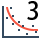
<style>
.page{position:relative;width:40px;height:39px;background:#ffffff}
.page>*{position:absolute;margin:0}
.t1{font:12px "AdobeHeitiStd-Regular";color:#000000}
</style>
<div class="page">
<p class="t1" style="left:27px;top:1px;width:11px;height:19px">3</p>
</div>
